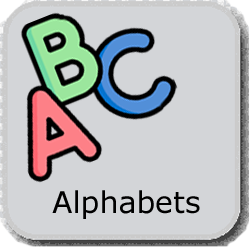
<style>
.page{position:relative;width:250px;height:250px;background:#d3d5d8}
.page>*{position:absolute;margin:0}
.t1{font:30px "Verdana";color:#000000}
</style>
<div class="page">
<p class="t1" style="left:52px;top:190px;width:148px;height:29px">Alphabets</p>
</div>
